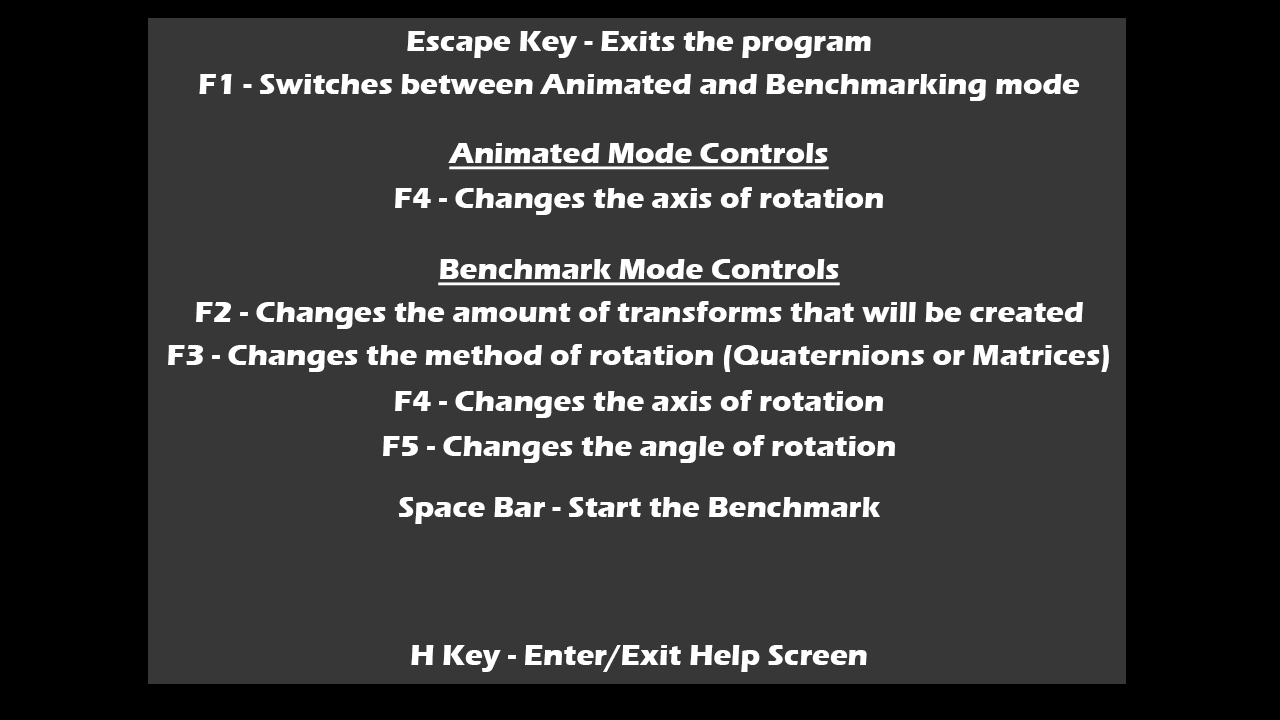
<style>
.page{position:relative;width:1280px;height:720px;background:#373737}
.page>*{position:absolute;margin:0}
.t1{font:30px "ErasITC-Bold";color:#ffffff}
.t2{font:30px "ErasITC-Bold";color:#ffffff;text-decoration:underline}
</style>
<div class="page">
<p class="t1" style="left:407px;top:31px;width:464px;height:27px">Escape Key - Exits the program</p>
<p class="t1" style="left:199px;top:74px;width:881px;height:27px">F1 - Switches between Animated and Benchmarking mode</p>
<p class="t2" style="left:448px;top:143px;width:381px;height:27px">Animated Mode Controls</p>
<p class="t1" style="left:395px;top:187px;width:488px;height:28px">F4 - Changes the axis of rotation</p>
<p class="t2" style="left:438px;top:259px;width:402px;height:27px">Benchmark Mode Controls</p>
<p class="t1" style="left:196px;top:301px;width:887px;height:28px">F2 - Changes the amount of transforms that will be created</p>
<p class="t1" style="left:168px;top:344px;width:941px;height:28px">F3 - Changes the method of rotation (Quaternions or Matrices)</p>
<p class="t1" style="left:395px;top:390px;width:488px;height:28px">F4 - Changes the axis of rotation</p>
<p class="t1" style="left:383px;top:435px;width:512px;height:28px">F5 - Changes the angle of rotation</p>
<p class="t1" style="left:398px;top:497px;width:482px;height:27px">Space Bar - Start the Benchmark</p>
<p class="t1" style="left:411px;top:645px;width:456px;height:27px">H Key - Enter/Exit Help Screen</p>
</div>
